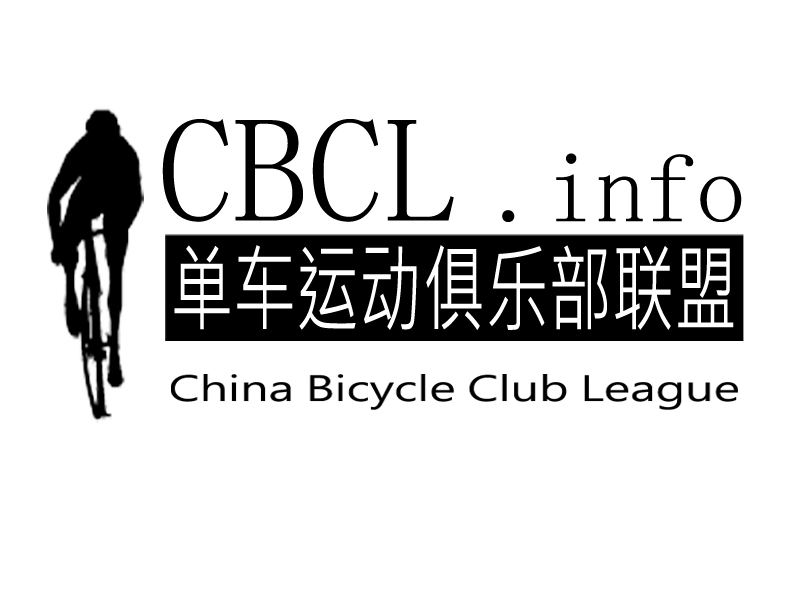
<style>
.page{position:relative;width:800px;height:600px;background:#ffffff}
.page>*{position:absolute;margin:0}
.t1{font:100px "SimSun";color:#000000}
.t2{font:150px "SimSun";color:#000000}
.t3{font:94.9px "MicrosoftJhengHeiRegular";color:#ffffff;scale:0.66 1}
</style>
<div class="page">
<p class="t1" style="left:162px;top:119px;width:580px;height:103px"><span class="t2">CBCL </span>.info</p>
<p class="t3" style="left:174px;top:245px;width:560px;height:85px">单车运动俱乐部联盟</p>
</div>
